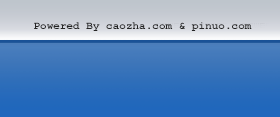
<style>
.page{position:relative;width:280px;height:117px}
.page>*{position:absolute;margin:0}
.t1{font:11px "CourierNewPS-BoldMT";color:#252525}
</style>
<div class="page">
<p class="t1" style="left:34px;top:22px;width:218px;height:9px">Powered By caozha.com &amp; pinuo.com</p>
</div>
